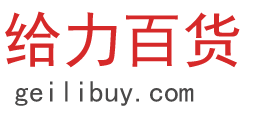
<style>
.page{position:relative;width:254px;height:118px;background:#ffffff}
.page>*{position:absolute;margin:0}
.t1{font:60px "SimHei";color:#d62929}
.t2{font:30px "SimHei";color:#4a4949}
</style>
<div class="page">
<p class="t1" style="left:5px;top:11px;width:235px;height:57px">给力百货</p>
<p class="t2" style="left:15px;top:81px;width:179px;height:25px">geilibuy.com</p>
</div>
